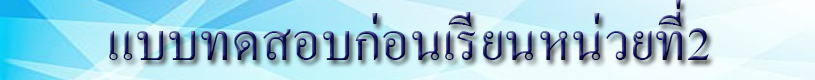
<style>
.page{position:relative;width:815px;height:80px}
.page>*{position:absolute;margin:0}
.t1{font:72px "AngsanaNew"}
</style>
<div class="page">
<p class="t1" style="left:109px;top:0px;width:600px;height:60px">แบบทดสอบก่อนเรียนหน่วยที่2</p>
</div>
